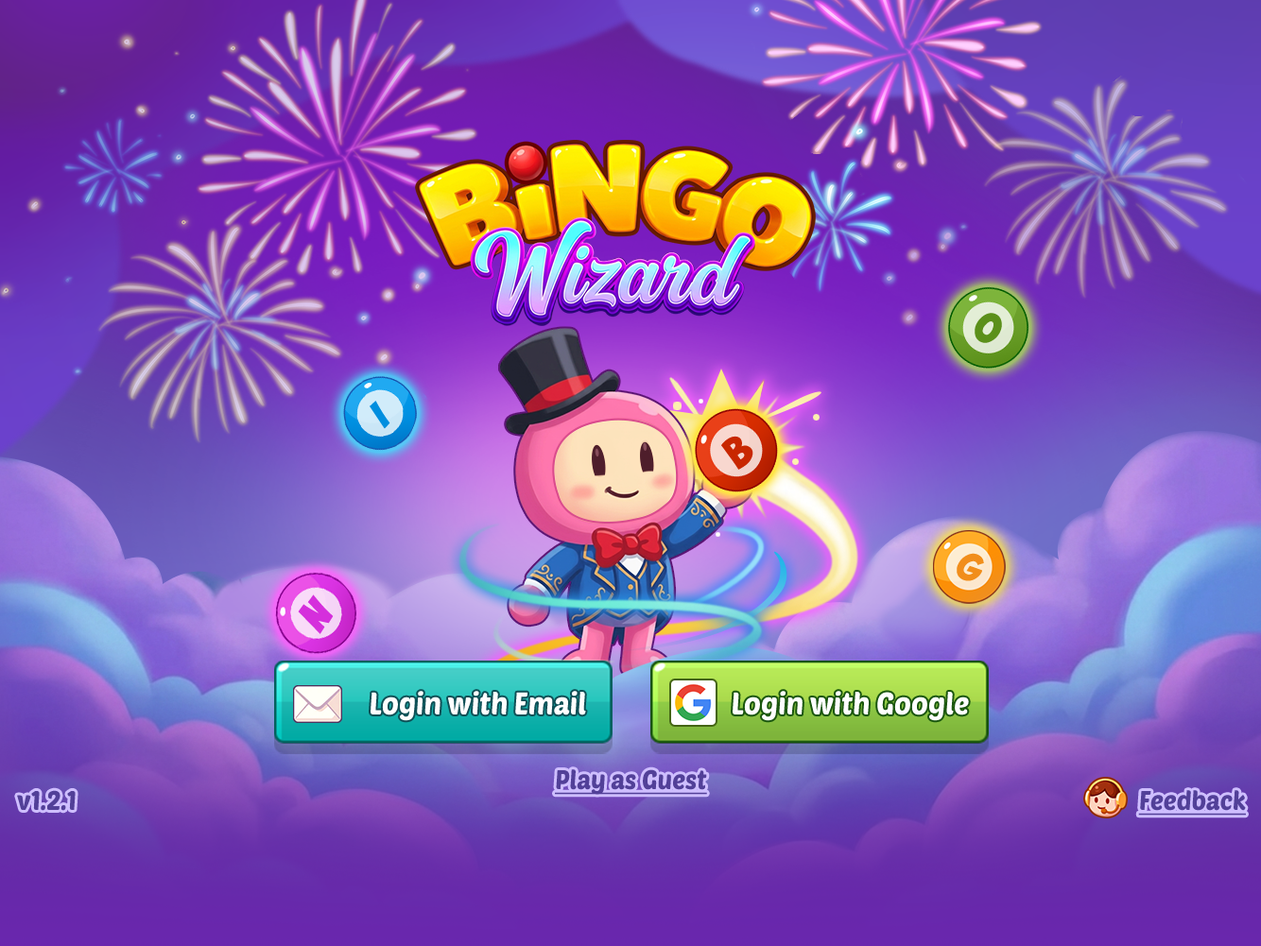
<style>
.page{position:relative;width:1261px;height:946px}
.page>*{position:absolute;margin:0}
.t1{font:30.9px "TypoPRO-PoetsenOne-Regular";color:#ffffff;scale:0.92 1}
.t2{font:26.8px "TypoPRO-PoetsenOne-Regular";color:#524098;text-decoration:underline;scale:0.92 1}
.t3{font:26.8px "TypoPRO-PoetsenOne-Regular";color:#524098;scale:0.92 1}
</style>
<div class="page">
<p class="t1" style="left:370px;top:691px;width:216px;height:30px">Login with Email</p>
<p class="t1" style="left:732px;top:691px;width:237px;height:30px">Login with Google</p>
<p class="t2" style="left:555px;top:769px;width:152px;height:26px">Play as Guest</p>
<p class="t3" style="left:17px;top:790px;width:59px;height:21px">v1.2.1</p>
<p class="t2" style="left:1138px;top:790px;width:107px;height:26px">Feedback</p>
</div>
